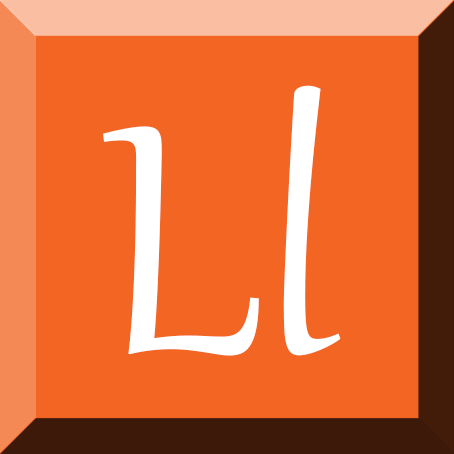
<style>
.page{position:relative;width:454px;height:454px;background:#f26522}
.page>*{position:absolute;margin:0}
.t1{font:399.6px "Gabriola";color:#ffffff}
</style>
<div class="page">
<p class="t1" style="left:103px;top:85px;width:238px;height:271px">Ll</p>
</div>
